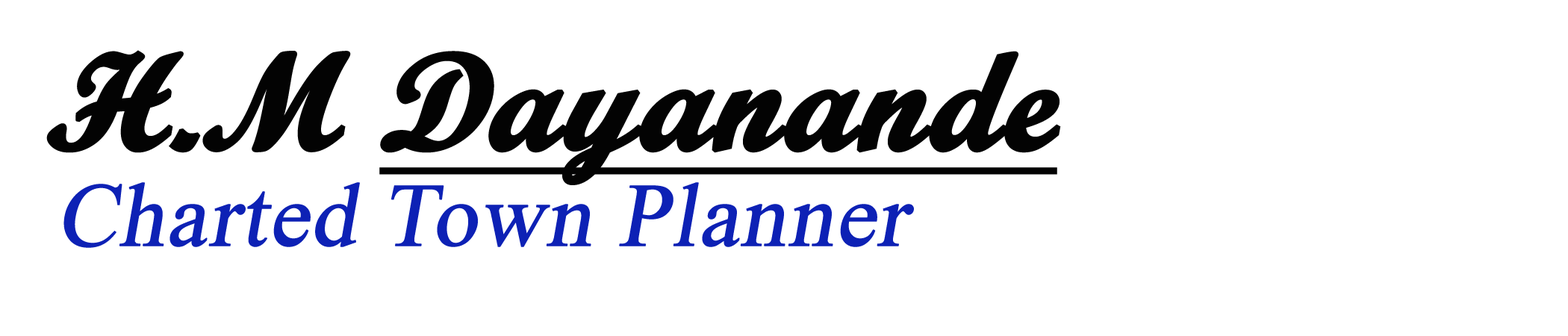
<style>
.page{position:relative;width:1568px;height:336px;background:#ffffff}
.page>*{position:absolute;margin:0}
.t1{font:136.9px "ScriptMTBold";color:#030303;font-weight:bold;font-style:italic;text-decoration:underline}
.t2{font:136.9px "ScriptMTBold";color:#030303;font-weight:bold;font-style:italic}
.t3{font:89.4px "TimesNewRomanPSMT";color:#0d21b5;font-weight:bold;font-style:italic}
</style>
<div class="page">
<p class="t1" style="left:46px;top:50px;width:1015px;height:135px"><span class="t2">H.M </span>Dayanande</p>
<p class="t3" style="left:63px;top:182px;width:851px;height:66px">Charted Town Planner</p>
</div>
